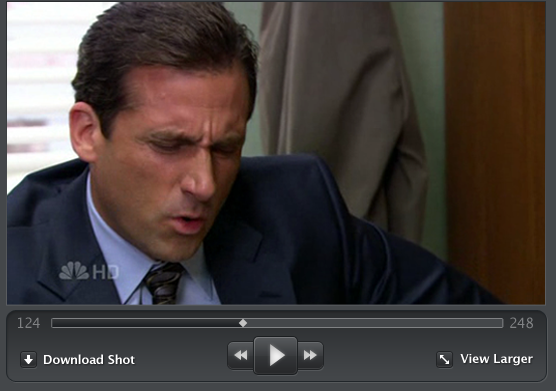
<style>
.page{position:relative;width:556px;height:391px}
.page>*{position:absolute;margin:0}
.t1{font:14px "LucidaGrande";color:#808284}
.t2{font:12px "LucidaGrande-Bold";color:#ffffff}
</style>
<div class="page">
<p class="t1" style="left:18px;top:317px;width:22px;height:11px">124</p>
<p class="t1" style="left:510px;top:317px;width:23px;height:12px">248</p>
<p class="t2" style="left:44px;top:354px;width:91px;height:10px">Download Shot</p>
<p class="t2" style="left:460px;top:354px;width:73px;height:12px">View Larger</p>
</div>
